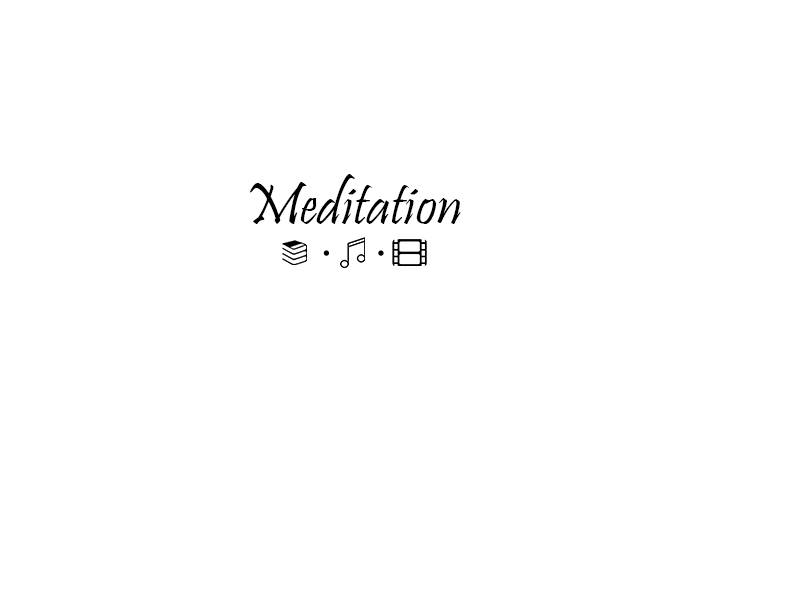
<style>
.page{position:relative;width:800px;height:600px;background:#ffffff}
.page>*{position:absolute;margin:0}
.t1{font:60px "Pristina-Regular";color:#000000}
</style>
<div class="page">
<p class="t1" style="left:250px;top:174px;width:211px;height:50px">Meditation</p>
</div>
